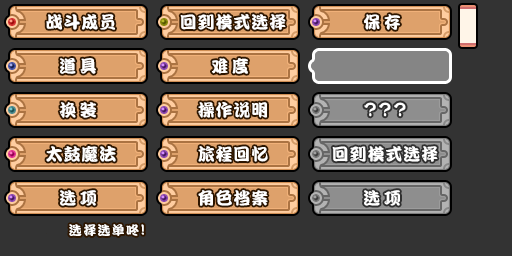
<style>
.page{position:relative;width:512px;height:256px;background:#333333}
.page>*{position:absolute;margin:0}
.t1{font:17px "DFPKanTingLiuW9";letter-spacing:0.05em;color:#ffffff}
.t2{font:17px "DFPKanTingLiuW9";letter-spacing:0.2em;color:#ffffff}
.t3{font:13px "DFPKanTingLiuW9";letter-spacing:0.1em;color:#ffffff}
.t4{font:15px "DFPKanTingLiuW9";letter-spacing:0.1em;color:#ffffff}
</style>
<div class="page">
<p class="t1" style="left:46px;top:14px;width:69px;height:16px">战斗成员</p>
<p class="t1" style="left:180px;top:14px;width:106px;height:16px">回到模式选择</p>
<p class="t2" style="left:364px;top:14px;width:36px;height:16px">保存</p>
<p class="t2" style="left:60px;top:58px;width:36px;height:16px">道具</p>
<p class="t2" style="left:212px;top:58px;width:36px;height:16px">难度</p>
<p class="t2" style="left:59px;top:102px;width:37px;height:16px">换装</p>
<p class="t1" style="left:198px;top:102px;width:69px;height:16px">操作说明</p>
<p class="t1" style="left:46px;top:146px;width:70px;height:16px">太鼓魔法</p>
<p class="t1" style="left:198px;top:146px;width:70px;height:16px">旅程回忆</p>
<p class="t1" style="left:332px;top:146px;width:106px;height:16px">回到模式选择</p>
<p class="t2" style="left:60px;top:190px;width:36px;height:16px">选项</p>
<p class="t1" style="left:198px;top:190px;width:70px;height:16px">角色档案</p>
<p class="t2" style="left:364px;top:190px;width:36px;height:16px">选项</p>
<p class="t3" style="left:69px;top:224px;width:75px;height:12px">选择选单咚<span class="t4">!</span></p>
</div>
